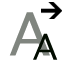
<style>
.page{position:relative;width:64px;height:64px;background:#ffffff}
.page>*{position:absolute;margin:0}
.t1{font:60px "LucidaSans";letter-spacing:-0.04em;color:#80857f}
.t2{font:36px "LucidaSans";letter-spacing:-0.04em;color:#020c00}
</style>
<div class="page">
<p class="t1" style="left:9px;top:12px;width:41px;height:44px">A</p>
<p class="t2" style="left:33px;top:33px;width:25px;height:27px">A</p>
</div>
